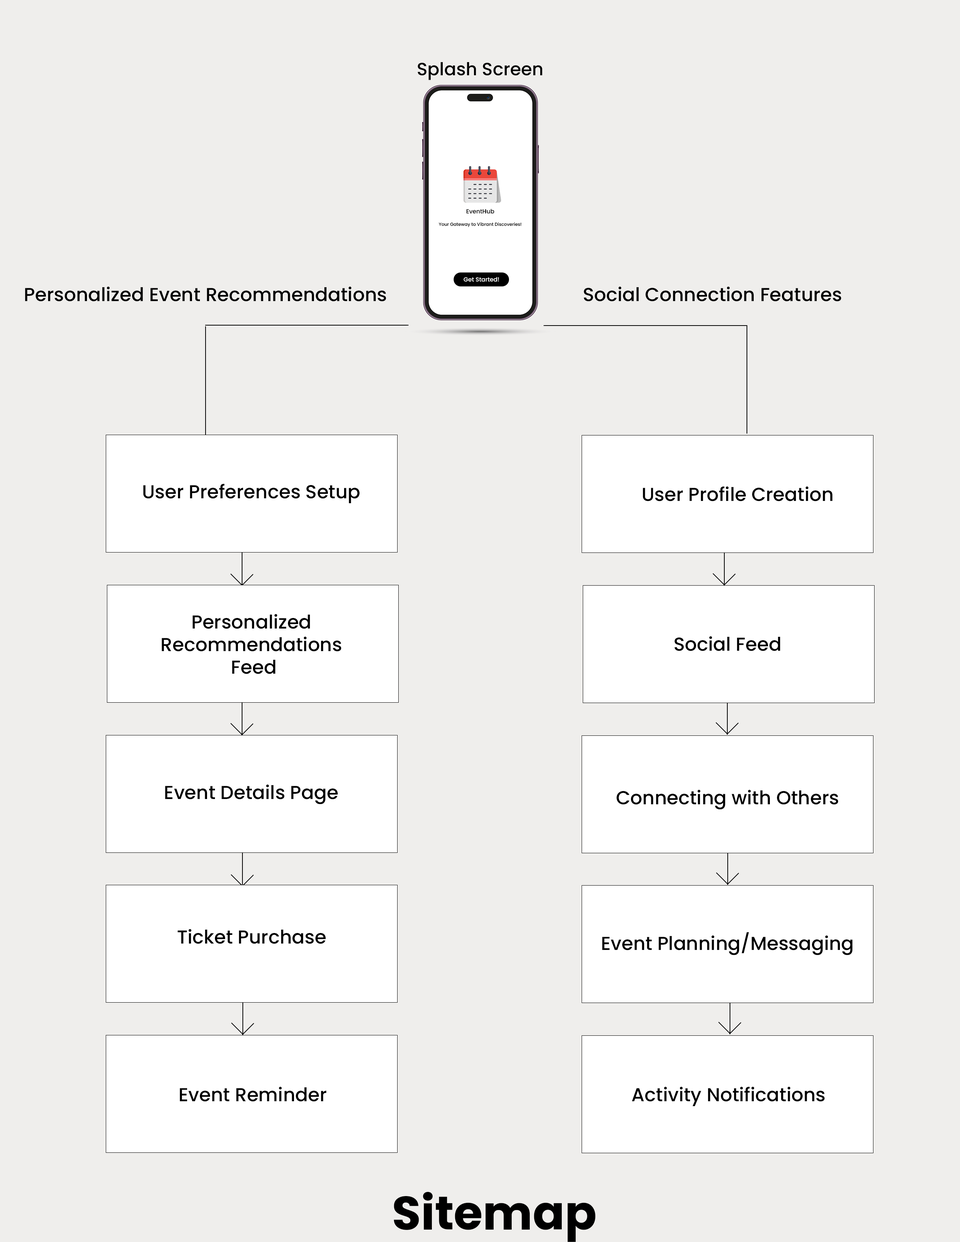
<style>
.page{position:relative;width:960px;height:1242px;background:#efeeec}
.page>*{position:absolute;margin:0}
.t1{font:17.8px "Poppins-Medium";color:#000000}
.t2{font:4.4px "Poppins-Medium";color:#000000}
.t3{font:5.9px "Poppins-Medium";color:#000000}
.t4{font:5.9px "Poppins-Medium";color:#ffffff}
.t5{font:18.8px "Poppins-Medium";color:#000000}
.t6{font:47.1px "Poppins-Bold";color:#000000}
</style>
<div class="page">
<p class="t1" style="left:417px;top:62px;width:125px;height:18px">Splash Screen</p>
<p class="t2" style="left:439px;top:209px;width:82px;height:18px;text-align:center"><span class="t3">EventHub<br><br></span>Your Gateway to Vibrant Discoveries!</p>
<p class="t4" style="left:463px;top:277px;width:36px;height:5px">Get Started!</p>
<p class="t5" style="left:25px;top:286px;width:361px;height:16px">Personalized Event Recommendations</p>
<p class="t5" style="left:584px;top:286px;width:257px;height:16px">Social Connection Features</p>
<p class="t5" style="left:143px;top:484px;width:216px;height:19px">User Preferences Setup</p>
<p class="t5" style="left:643px;top:486px;width:189px;height:15px">User Profile Creation</p>
<p class="t5" style="left:161px;top:614px;width:180px;height:60px;text-align:center">Personalized <br>Recommendations <br>Feed</p>
<p class="t5" style="left:675px;top:636px;width:105px;height:15px">Social Feed</p>
<p class="t5" style="left:165px;top:784px;width:173px;height:20px">Event Details Page</p>
<p class="t5" style="left:616px;top:790px;width:222px;height:20px">Connecting with Others</p>
<p class="t5" style="left:178px;top:929px;width:148px;height:15px">Ticket Purchase</p>
<p class="t5" style="left:602px;top:932px;width:251px;height:23px">Event Planning/Messaging</p>
<p class="t5" style="left:180px;top:1087px;width:146px;height:15px">Event Reminder</p>
<p class="t5" style="left:632px;top:1087px;width:193px;height:19px">Activity Notifications</p>
<p class="t6" style="left:394px;top:1192px;width:202px;height:50px">Sitemap</p>
</div>
